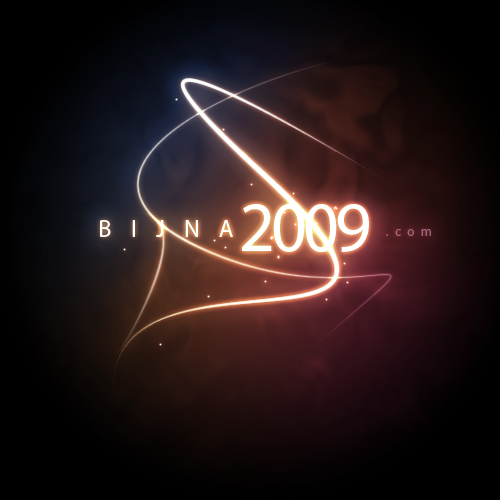
<style>
.page{position:relative;width:500px;height:500px}
.page>*{position:absolute;margin:0}
.t1{font:70.4px "MyriadPro-Regular";letter-spacing:-0.06em;color:#ffffff}
.t2{font:24px "MyriadPro-Regular";letter-spacing:0.8em;color:#ffffff}
.t3{font:13px "MyriadPro-Regular";letter-spacing:0.5em;color:#97687b}
</style>
<div class="page">
<p class="t1" style="left:242px;top:204px;width:127px;height:48px">2009</p>
<p class="t2" style="left:100px;top:220px;width:133px;height:17px">BIJNA</p>
<p class="t3" style="left:386px;top:229px;width:45px;height:7px">.com</p>
</div>
